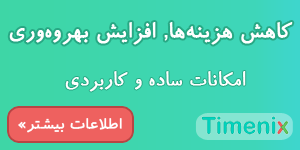
<style>
.page{position:relative;width:300px;height:150px}
.page>*{position:absolute;margin:0}
.t1{font:25px "BRoya";color:#ffffff;font-weight:bold}
.t2{font:22px "BRoya";color:#ffffff;font-weight:bold}
</style>
<div class="page">
<p class="t1" style="left:9px;top:22px;width:284px;height:23px">کاهش هزینه‌ها, افزایش بهروه‌وری</p>
<p class="t2" style="left:65px;top:71px;width:181px;height:21px">امکانات ساده و کاربردی</p>
</div>
